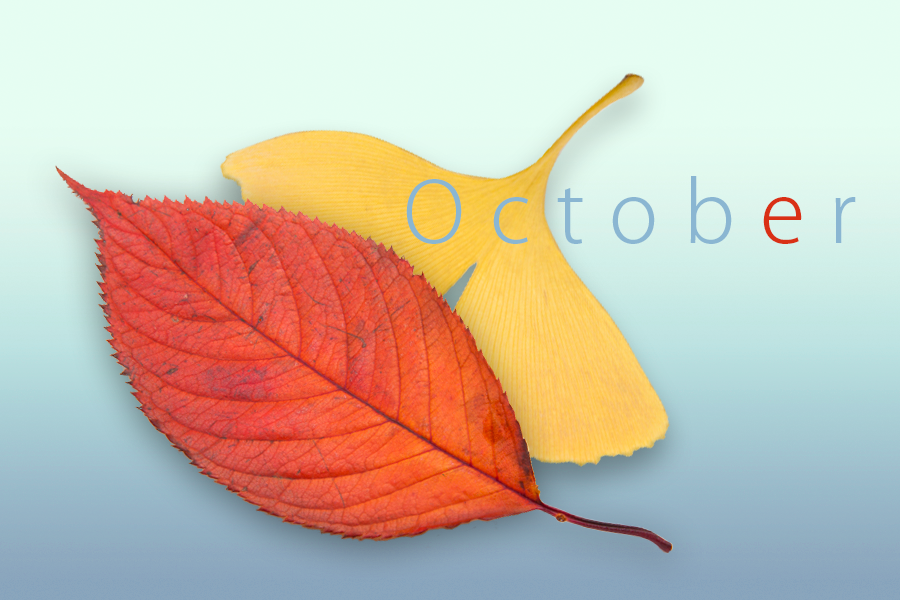
<style>
.page{position:relative;width:900px;height:600px}
.page>*{position:absolute;margin:0}
.t1{font:83.3px "KozGoPr6N-Light";letter-spacing:0.3em;color:#8ab6d2}
.t2{font:83.3px "KozGoPr6N-Light";letter-spacing:0.3em;color:#d93015}
</style>
<div class="page">
<p class="t1" style="left:406px;top:176px;width:450px;height:68px">Octob<span class="t2">e</span>r</p>
</div>
